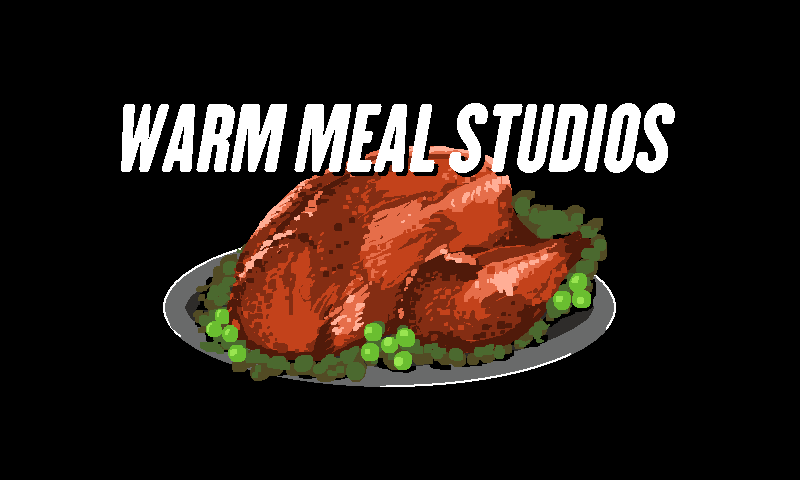
<style>
.page{position:relative;width:800px;height:480px;background:#000000}
.page>*{position:absolute;margin:0}
.t1{font:86px "H.H.Samuel";color:#ffffff;font-style:italic}
</style>
<div class="page">
<p class="t1" style="left:121px;top:103px;width:554px;height:70px">WARM MEAL STUDIOS</p>
</div>
